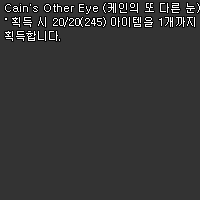
<style>
.page{position:relative;width:200px;height:200px;background:#333333}
.page>*{position:absolute;margin:0}
.t1{font:11px/14px "Dotum";color:#ffffff}
</style>
<div class="page">
<p class="t1" style="left:5px;top:3px;width:195px;height:38px">Cain's Other Eye (케인의 또 다른 눈)<br>˚ 획득 시 20/20(245) 아이템을 1개까지<br>획득합니다.</p>
</div>
